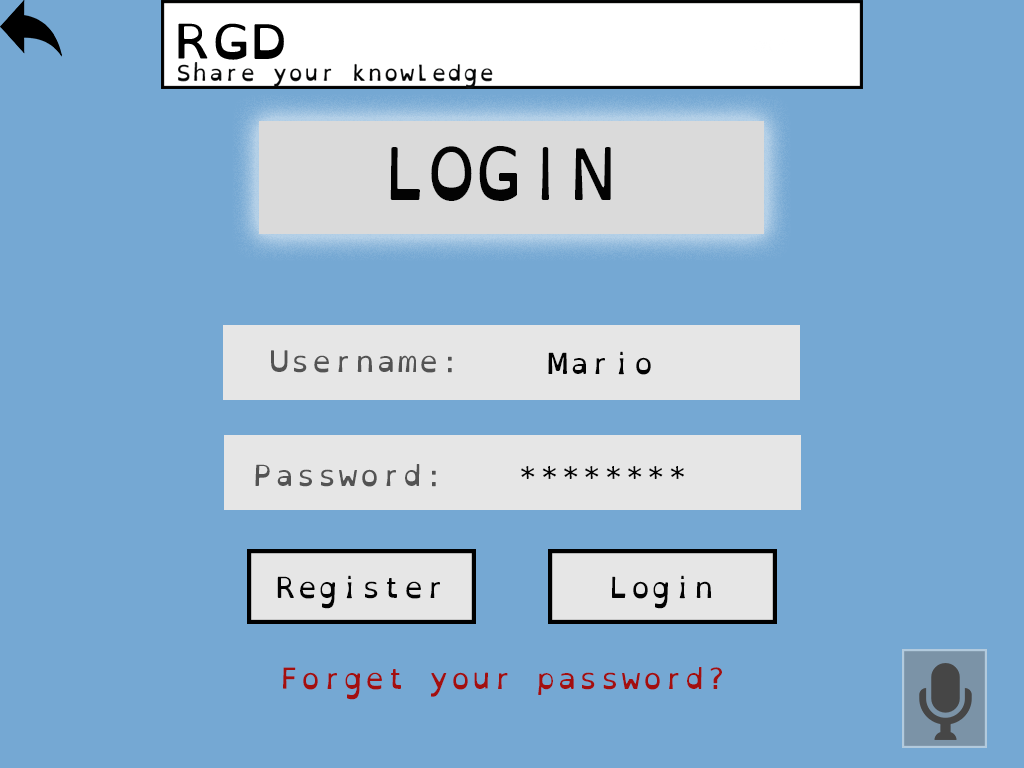
<style>
.page{position:relative;width:1024px;height:768px;background:#75a8d3}
.page>*{position:absolute;margin:0}
.t1{font:72.5px "OpenDyslexicMono-Regular";color:#030303;scale:0.88 1}
.t2{font:29.2px "OpenDyslexicMono-Regular";color:#535353}
.t3{font:29.2px "OpenDyslexicMono-Regular";color:#030303}
.t4{font:29.2px "OpenDyslexicMono-Regular";color:#a30f0f}
</style>
<div class="page">
<p class="t1" style="left:390px;top:145px;width:221px;height:56px">LOGIN</p>
<p class="t2" style="left:271px;top:350px;width:181px;height:23px">Username:</p>
<p class="t3" style="left:548px;top:351px;width:103px;height:24px">Mario</p>
<p class="t2" style="left:255px;top:464px;width:181px;height:23px">Password:</p>
<p class="t3" style="left:521px;top:466px;width:163px;height:13px">********</p>
<p class="t3" style="left:277px;top:575px;width:163px;height:34px">Register</p>
<p class="t3" style="left:612px;top:575px;width:100px;height:34px">Login</p>
<p class="t4" style="left:283px;top:667px;width:439px;height:33px">Forget your password?</p>
</div>
